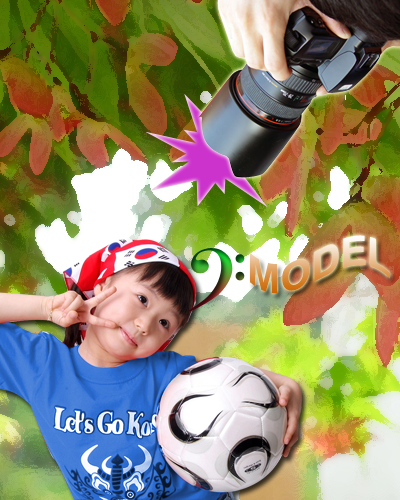
<style>
.page{position:relative;width:400px;height:500px}
.page>*{position:absolute;margin:0}
.t1{font:40px "Arial-BoldMT"}
</style>
<div class="page">
<p class="t1" style="left:250px;top:235px;width:140px;height:59px">MODEL</p>
</div>
